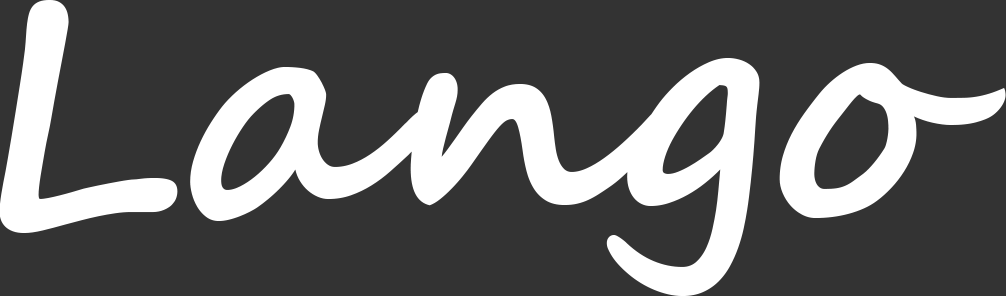
<style>
.page{position:relative;width:1006px;height:296px;background:#333333}
.page>*{position:absolute;margin:0}
.t1{font:309px "SegoeScript-Bold";color:#ffffff}
</style>
<div class="page">
<p class="t1" style="left:0px;top:0px;width:1006px;height:296px">Lango</p>
</div>
